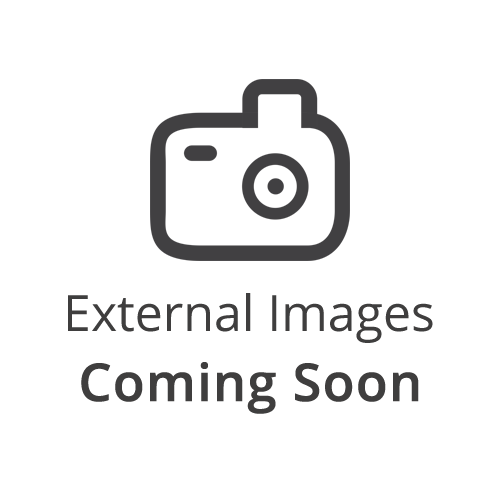
<style>
.page{position:relative;width:500px;height:500px;background:#ffffff}
.page>*{position:absolute;margin:0}
.t1{font:50px "OpenSans-Regular";color:#3f3e3e}
.t2{font:52px "OpenSans-SemiBold";color:#3f3e3e;font-weight:bold}
</style>
<div class="page">
<p class="t1" style="left:68px;top:293px;width:365px;height:50px">External Images</p>
<p class="t2" style="left:81px;top:362px;width:338px;height:52px">Coming Soon</p>
</div>
